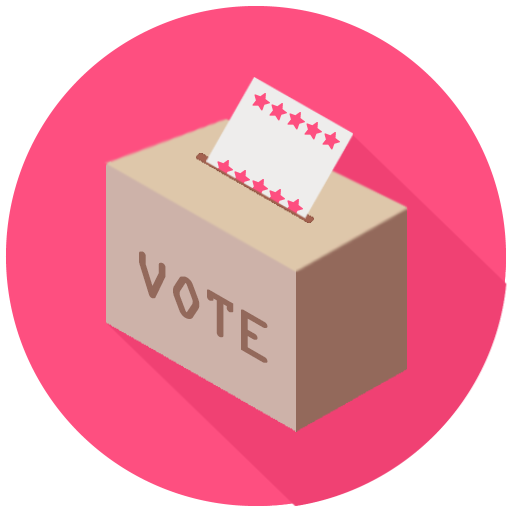
<style>
.page{position:relative;width:512px;height:512px;background:#fe4f80}
.page>*{position:absolute;margin:0}
.t1{font:61.8px "OCRAExtended";letter-spacing:-0.062em;color:#93695b;font-weight:bold;scale:1.11 1}
</style>
<div class="page">
<p class="t1" style="left:139px;top:251px;width:129px;height:112px;rotate:30deg">VOTE</p>
</div>
